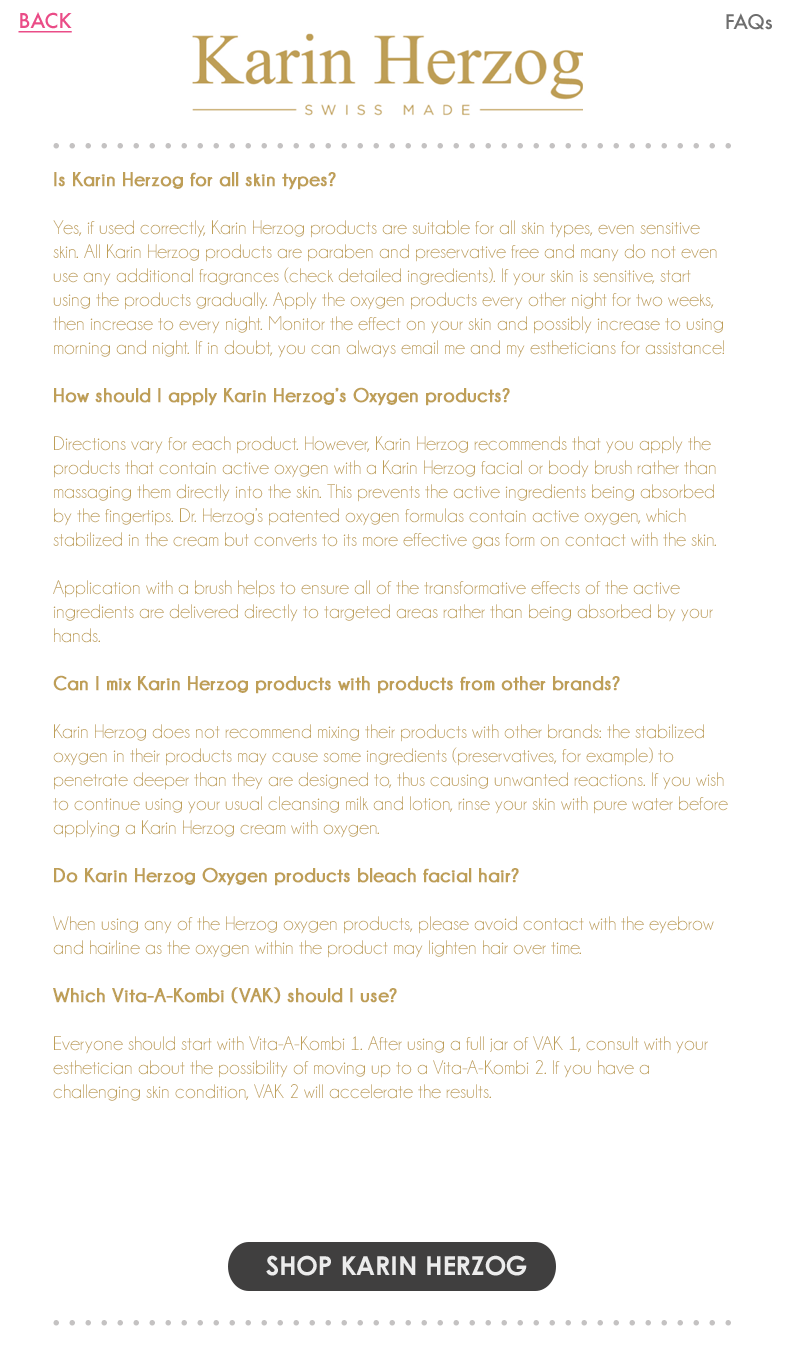
<style>
.page{position:relative;width:790px;height:1345px;background:#ffffff}
.page>*{position:absolute;margin:0}
.t1{font:20px "Futura-Medium";color:#ea4c87;text-decoration:underline}
.t2{font:19.5px "Futura-Medium";color:#6e6e6e}
.t3{font:40px "Futura-Medium";letter-spacing:0.1em;color:#c4c2c2}
.t4{font:20px/24px "Champagne&Limousines";color:#be9e56}
.t5{font:20px/24px "Champagne&Limousines-Bold";color:#be9e56;font-weight:bold}
.t6{font:26px "CenturyGothic-Bold";color:#ececec}
</style>
<div class="page">
<p class="t1" style="left:18px;top:12px;width:54px;height:21px">BACK</p>
<p class="t2" style="left:726px;top:13px;width:46px;height:17px">FAQs</p>
<p class="t3" style="left:53px;top:143px;width:678px;height:6px">...........................................</p>
<p class="t4" style="left:53px;top:172px;width:675px;height:929px"><span class="t5">Is Karin Herzog for all skin types?<br></span><br>Yes, if used correctly, Karin Herzog products are suitable for all skin types, even sensitive skin. All Karin Herzog products are paraben and preservative free and many do not even use any additional fragrances (check detailed ingredients). If your skin is sensitive, start using the products gradually. Apply the oxygen products every other night for two weeks, then increase to every night. Monitor the effect on your skin and possibly increase to using morning and night. If in doubt, you can always email me and my estheticians for assistance!<br><br><span class="t5">How should I apply Karin Herzog’s Oxygen products?<br></span><br>Directions vary for each product. However, Karin Herzog recommends that you apply the products that contain active oxygen with a Karin Herzog facial or body brush rather than massaging them directly into the skin. This prevents the active ingredients being absorbed by the fingertips. Dr. Herzog’s patented oxygen formulas contain active oxygen, which stabilized in the cream but converts to its more effective gas form on contact with the skin.<br><br>Application with a brush helps to ensure all of the transformative effects of the active ingredients are delivered directly to targeted areas rather than being absorbed by your hands. <br><br><span class="t5">Can I mix Karin Herzog products with products from other brands?<br></span><br>Karin Herzog does not recommend mixing their products with other brands: the stabilized oxygen in their products may cause some ingredients (preservatives, for example) to penetrate deeper than they are designed to, thus causing unwanted reactions. If you wish to continue using your usual cleansing milk and lotion, rinse your skin with pure water before applying a Karin Herzog cream with oxygen.<br><br><span class="t5">Do Karin Herzog Oxygen products bleach facial hair?<br></span><br>When using any of the Herzog oxygen products, please avoid contact with the eyebrow and hairline as the oxygen within the product may lighten hair over time.<br><br><span class="t5">Which Vita-A-Kombi (VAK) should I use?<br></span><br>Everyone should start with Vita-A-Kombi 1. After using a full jar of VAK 1, consult with your esthetician about the possibility of moving up to a Vita-A-Kombi 2. If you have a challenging skin condition, VAK 2 will accelerate the results.</p>
<p class="t6" style="left:266px;top:1255px;width:261px;height:21px">SHOP KARIN HERZOG</p>
<p class="t3" style="left:53px;top:1320px;width:678px;height:6px">...........................................</p>
</div>
